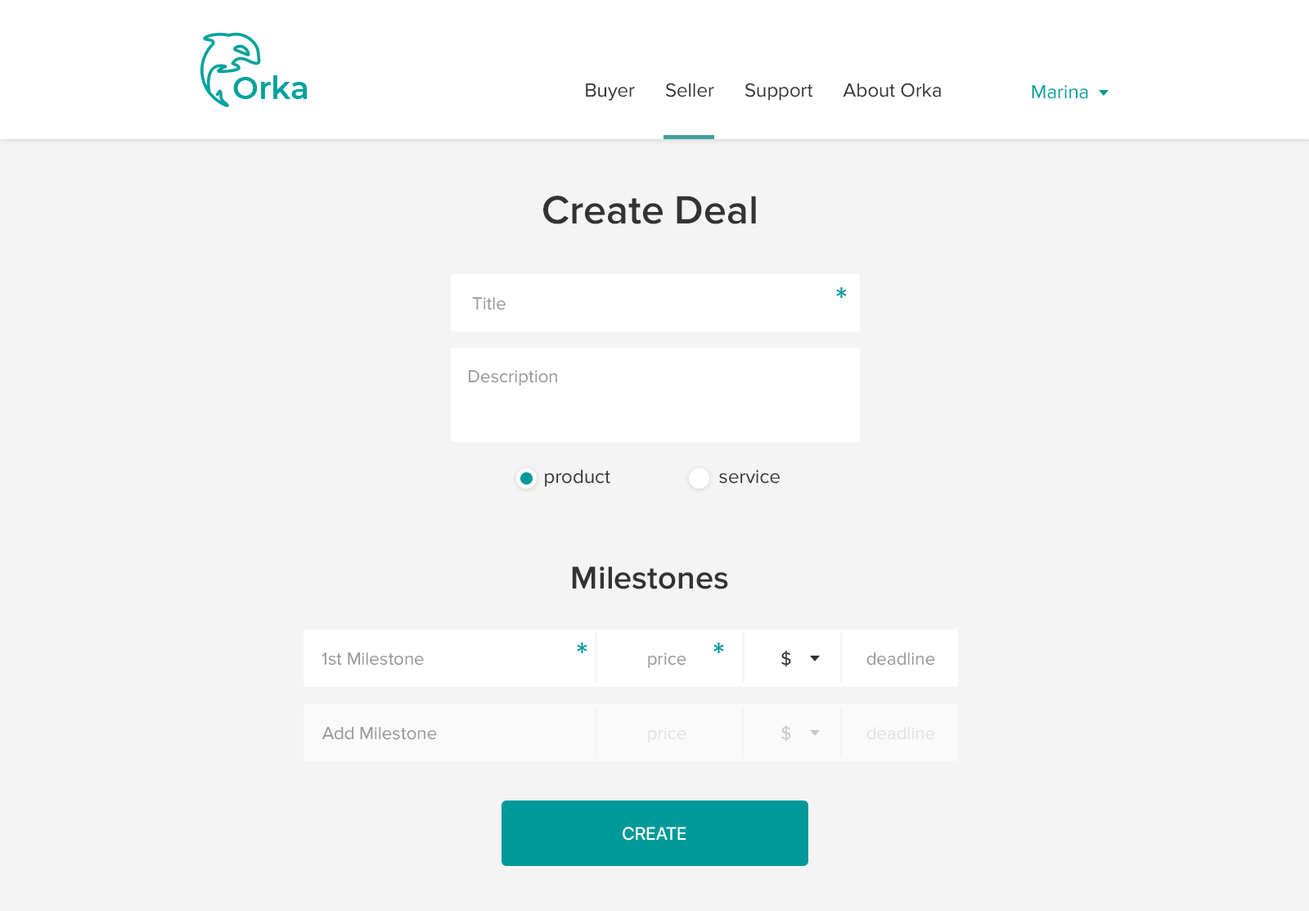
<style>
.page{position:relative;width:1309px;height:911px;background:#f4f4f4}
.page>*{position:absolute;margin:0}
.t1{font:19.6px "ProximaNova-Regular";color:#333332}
.t2{font:19.6px "ProximaNova-Regular";color:#00a29c}
.t3{font:40.9px "ProximaNova-Semibold";color:#333332}
.t4{font:35.7px "ProximaNova-Regular";color:#009999}
.t5{font:18px "ProximaNova-Regular";color:#999999}
.t6{font:32.7px "ProximaNova-Semibold";color:#333332}
.t7{font:18px "ProximaNova-Regular";color:#333333}
.t8{font:18px "ProximaNova-Regular";color:#c8c8c8}
.t9{font:18px "ProximaNova-Regular";color:#e1e1e1}
.t10{font:18px "SFUIDisplay-Medium";color:#ffffff;text-transform:uppercase}
</style>
<div class="page">
<p class="t1" style="left:586px;top:83px;width:355px;height:18px">Buyer      Seller      Support      About Orka</p>
<p class="t2" style="left:1032px;top:84px;width:56px;height:15px">Marina</p>
<p class="t3" style="left:543px;top:196px;width:213px;height:28px">Create Deal</p>
<p class="t4" style="left:836px;top:287px;width:11px;height:11px">*</p>
<p class="t5" style="left:472px;top:297px;width:34px;height:13px">Title</p>
<p class="t5" style="left:468px;top:370px;width:89px;height:16px">Description</p>
<p class="t1" style="left:545px;top:469px;width:65px;height:18px">product</p>
<p class="t1" style="left:719px;top:470px;width:61px;height:14px">service</p>
<p class="t6" style="left:572px;top:566px;width:156px;height:23px">Milestones</p>
<p class="t5" style="left:322px;top:652px;width:102px;height:13px">1st Milestone</p>
<p class="t4" style="left:577px;top:642px;width:11px;height:11px">*</p>
<p class="t5" style="left:648px;top:652px;width:39px;height:17px">price</p>
<p class="t4" style="left:714px;top:642px;width:10px;height:11px">*</p>
<p class="t7" style="left:781px;top:651px;width:10px;height:16px">$</p>
<p class="t5" style="left:867px;top:652px;width:68px;height:13px">deadline</p>
<p class="t8" style="left:781px;top:725px;width:10px;height:16px">$</p>
<p class="t5" style="left:322px;top:727px;width:115px;height:13px">Add Milestone</p>
<p class="t9" style="left:648px;top:727px;width:39px;height:16px">price</p>
<p class="t9" style="left:867px;top:727px;width:68px;height:13px">deadline</p>
<p class="t10" style="left:623px;top:826px;width:64px;height:14px">Create</p>
</div>
